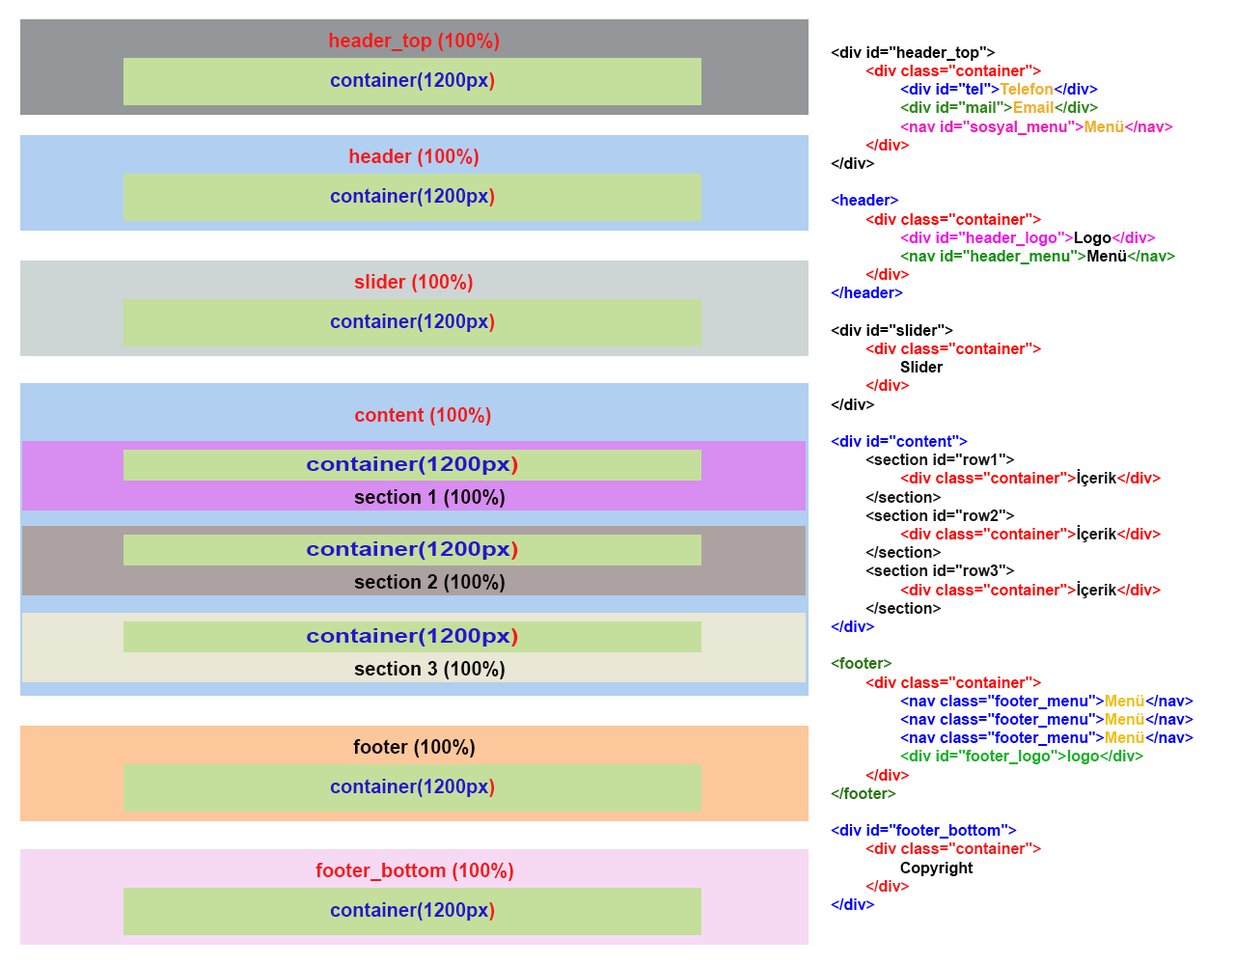
<style>
.page{position:relative;width:1235px;height:965px;background:#ffffff}
.page>*{position:absolute;margin:0}
.t1{font:19.3px "Arial-BoldMT";color:#f31b1b}
.t2{font:15.4px "Arial-BoldMT";color:#0000ff}
.t3{font:15.4px "Arial-BoldMT";color:#000000}
.t4{font:15.4px "Arial-BoldMT";color:#ff0000}
.t5{font:15.4px "Arial-BoldMT";color:#f1b026}
.t6{font:15.4px "Arial-BoldMT";color:#318b15}
.t7{font:15.4px "Arial-BoldMT";color:#f21abd}
.t8{font:15.4px "Arial-BoldMT";color:#f116e9}
.t9{font:15.4px "Arial-BoldMT";color:#109510}
.t10{font:15.4px "Arial-BoldMT";color:#070708}
.t11{font:15.4px "Arial-BoldMT";color:#171616}
.t12{font:15.4px "Arial-BoldMT";color:#28770d}
.t13{font:15.4px "Arial-BoldMT";color:#efc20e}
.t14{font:15.4px "Arial-BoldMT";color:#16b228}
.t15{font:15.4px "Arial-BoldMT";color:#f31b1b}
.t16{font:19.3px "Arial-BoldMT";color:#2715cb}
.t17{font:19.3px "Arial-BoldMT";color:#2715cb;scale:1.29 1}
.t18{font:19.3px "Arial-BoldMT";color:#f31b1b;scale:1.29 1}
.t19{font:19.3px "Arial-BoldMT";color:#0b0303}
.t20{font:19.3px "Arial-BoldMT";color:#090707}
</style>
<div class="page">
<p class="t1" style="left:329px;top:33px;width:171px;height:18px">header_top (100%)</p>
<p class="t2" style="left:831px;top:46px;width:363px;height:864px"><span class="t3">&lt;div id="header_top"&gt;<br> </span><span class="t4">&lt;div class="container"&gt;<br>  </span>&lt;div id="tel"&gt;<span class="t5">Telefon</span>&lt;/div&gt;<br>  <span class="t6">&lt;div id="mail"&gt;</span><span class="t5">Email</span><span class="t6">&lt;/div&gt;<br>  </span><span class="t7">&lt;nav id="sosyal_menu"&gt;</span><span class="t5">Menü</span><span class="t7">&lt;/nav&gt;<br> </span><span class="t4">&lt;/div&gt;<br></span><span class="t3">&lt;/div&gt;<br><br></span>&lt;header&gt;<br> <span class="t4">&lt;div class="container"&gt;<br>  </span><span class="t8">&lt;div id="header_logo"&gt;</span><span class="t3">Logo</span><span class="t8">&lt;/div&gt;<br></span><span class="t9">  &lt;nav id="header_menu"&gt;</span><span class="t3">Menü</span><span class="t9">&lt;/nav&gt;<br> </span><span class="t4">&lt;/div&gt;<br></span>&lt;/header&gt;<br><br><span class="t3">&lt;div id="slider"&gt;<br> </span><span class="t4">&lt;div class="container"&gt;<br>  </span><span class="t10">Slider<br> </span><span class="t4">&lt;/div&gt;<br></span><span class="t3">&lt;/div&gt;<br><br></span>&lt;div id="content"&gt;<br><span class="t11"> &lt;section id="row1"&gt;<br>  </span><span class="t4">&lt;div class="container"&gt;</span><span class="t11">İçerik</span><span class="t4">&lt;/div&gt;<br></span><span class="t11"> &lt;/section&gt;<br> &lt;section id="row2"&gt;<br>  </span><span class="t4">&lt;div class="container"&gt;</span><span class="t11">İçerik</span><span class="t4">&lt;/div&gt;<br></span><span class="t11"> &lt;/section&gt;<br> &lt;section id="row3"&gt;<br>  </span><span class="t4">&lt;div class="container"&gt;</span><span class="t11">İçerik</span><span class="t4">&lt;/div&gt;<br></span><span class="t11"> &lt;/section&gt;<br></span>&lt;/div&gt;<br><br><span class="t12">&lt;footer&gt;<br> </span><span class="t4">&lt;div class="container"&gt;<br>  </span>&lt;nav class="footer_menu"&gt;<span class="t13">Menü</span>&lt;/nav&gt;<br>  &lt;nav class="footer_menu"&gt;<span class="t13">Menü</span>&lt;/nav&gt;<br>  &lt;nav class="footer_menu"&gt;<span class="t13">Menü</span>&lt;/nav&gt;<br>  <span class="t14">&lt;div id="footer_logo"&gt;logo&lt;/div&gt;<br> </span><span class="t4">&lt;/div&gt;<br></span><span class="t12">&lt;/footer&gt;<br><br></span>&lt;div id="footer_bottom"&gt;<br><span class="t15"> &lt;div class="container"&gt;<br>  </span><span class="t3">Copyright<br></span><span class="t15"> &lt;/div&gt;<br></span>&lt;/div&gt;</p>
<p class="t16" style="left:330px;top:72px;width:165px;height:19px">container(1200px<span class="t1">)</span></p>
<p class="t1" style="left:349px;top:149px;width:130px;height:18px">header (100%)</p>
<p class="t16" style="left:330px;top:188px;width:165px;height:19px">container(1200px<span class="t1">)</span></p>
<p class="t1" style="left:354px;top:274px;width:119px;height:18px">slider (100%)</p>
<p class="t16" style="left:330px;top:314px;width:165px;height:18px">container(1200px<span class="t1">)</span></p>
<p class="t1" style="left:355px;top:407px;width:136px;height:19px">content (100%)</p>
<p class="t17" style="left:307px;top:457px;width:211px;height:18px">container(1200px<span class="t18">)</span></p>
<p class="t19" style="left:354px;top:489px;width:151px;height:19px">section 1 (100%)</p>
<p class="t17" style="left:307px;top:541px;width:211px;height:19px">container(1200px<span class="t18">)</span></p>
<p class="t19" style="left:354px;top:574px;width:151px;height:19px">section 2 (100%)</p>
<p class="t17" style="left:307px;top:628px;width:211px;height:19px">container(1200px<span class="t18">)</span></p>
<p class="t19" style="left:354px;top:661px;width:151px;height:18px">section 3 (100%)</p>
<p class="t20" style="left:353px;top:739px;width:122px;height:19px">footer (100%)</p>
<p class="t16" style="left:330px;top:779px;width:165px;height:18px">container(1200px<span class="t1">)</span></p>
<p class="t1" style="left:316px;top:863px;width:197px;height:18px">footer_bottom (100%)</p>
<p class="t16" style="left:330px;top:902px;width:165px;height:19px">container(1200px<span class="t1">)</span></p>
</div>
